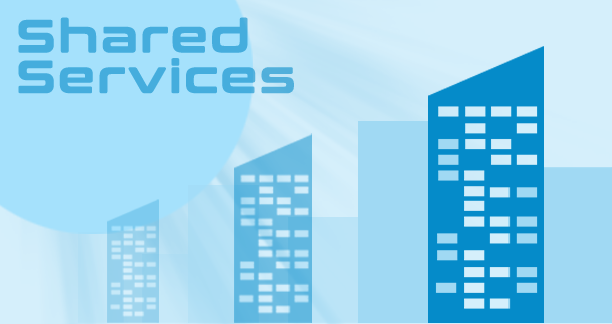
<style>
.page{position:relative;width:612px;height:324px;background:#a5e1fc}
.page>*{position:absolute;margin:0}
.t1{font:44.9px/40.6px "ConthraxSb-Regular";letter-spacing:0.05em;color:#45addd;font-weight:bold}
</style>
<div class="page">
<p class="t1" style="left:18px;top:17px;width:276px;height:77px">Shared<br>Services</p>
</div>
